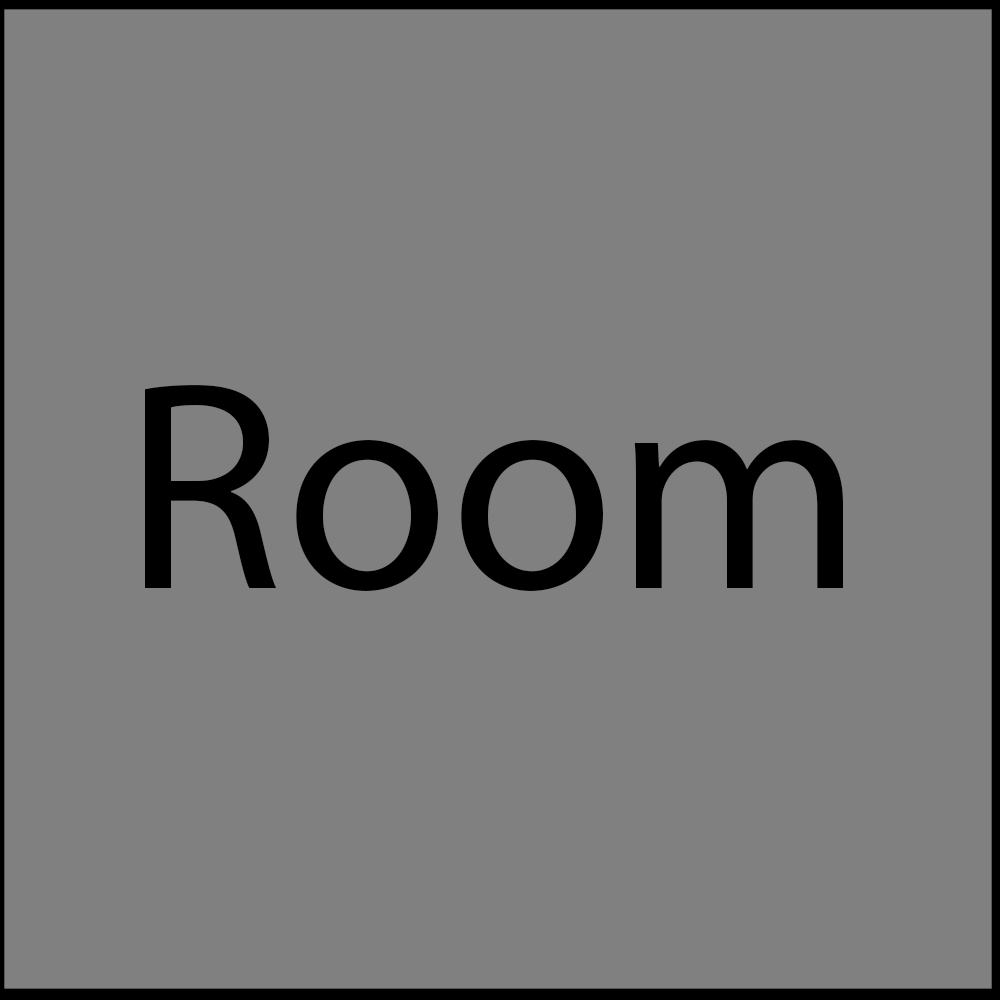
<style>
.page{position:relative;width:1000px;height:1000px;background:#808080}
.page>*{position:absolute;margin:0}
.t1{font:300px "MyriadPro-Regular";color:#000000}
</style>
<div class="page">
<p class="t1" style="left:145px;top:385px;width:698px;height:206px">Room</p>
</div>
